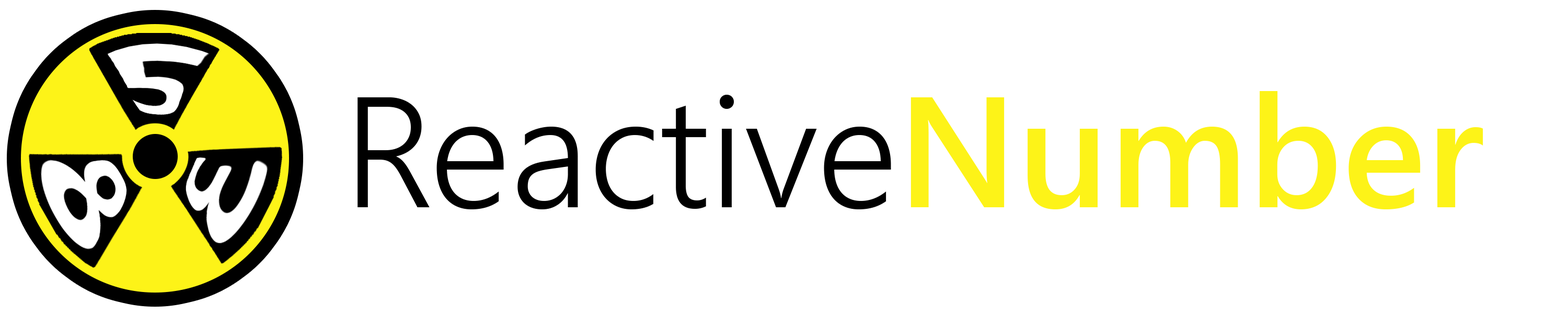
<style>
.page{position:relative;width:1568px;height:314px;background:#ffffff}
.page>*{position:absolute;margin:0}
.t1{font:156.8px "SegoeUI-Semilight";color:#000000}
.t2{font:156.8px "SegoeUI-Semibold";color:#fdf318}
</style>
<div class="page">
<p class="t1" style="left:358px;top:91px;width:1125px;height:118px">Reactive<span class="t2">Number</span></p>
</div>
